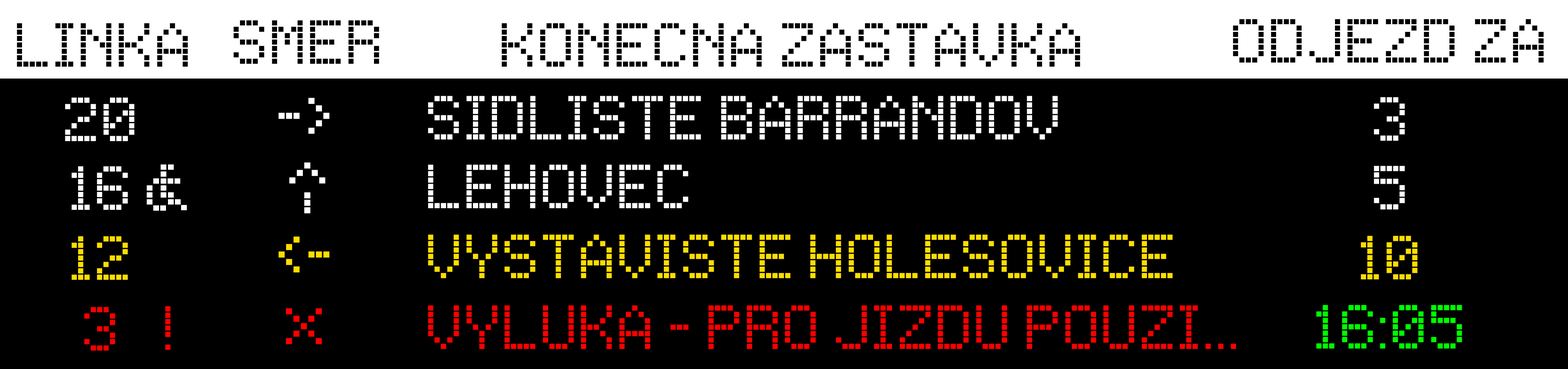
<style>
.page{position:relative;width:1568px;height:369px;background:#000000}
.page>*{position:absolute;margin:0}
.t1{font:102.2px "LCDDot-TR";color:#000000}
.t2{font:102.2px "LCDDot-TR";color:#ffffff}
.t3{font:119.2px "LCDDot-TR";color:#ffffff}
.t4{font:119.5px "LCDDot-TR";color:#ffffff}
.t5{font:102.2px "LCDDot-TR";color:#ffde00}
.t6{font:119.2px "LCDDot-TR";color:#ffde00}
.t7{font:102.2px "LCDDot-TR";color:#ff0000}
.t8{font:102.2px "LCDDot-TR";color:#00ff00}
.t9{font:119.2px "LCDDot-TR";color:#ff0000}
</style>
<div class="page">
<p class="t1" style="left:17px;top:23px;width:171px;height:44px">LINKA</p>
<p class="t1" style="left:233px;top:20px;width:146px;height:44px">SMER</p>
<p class="t1" style="left:502px;top:23px;width:578px;height:44px">KONECNA ZASTAVKA</p>
<p class="t1" style="left:1233px;top:19px;width:311px;height:44px">ODJEZD ZA</p>
<p class="t2" style="left:65px;top:97px;width:69px;height:44px">20</p>
<p class="t3" style="left:278px;top:98px;width:51px;height:36px">-&gt;</p>
<p class="t2" style="left:428px;top:96px;width:630px;height:43px">SIDLISTE BARRANDOV</p>
<p class="t2" style="left:1374px;top:97px;width:31px;height:44px">3</p>
<p class="t2" style="left:72px;top:166px;width:56px;height:44px">16</p>
<p class="t4" style="left:289px;top:162px;width:36px;height:51px;rotate:-90deg">-&gt;</p>
<p class="t2" style="left:428px;top:164px;width:260px;height:44px">LEHOVEC</p>
<p class="t2" style="left:1374px;top:166px;width:31px;height:43px">5</p>
<p class="t5" style="left:72px;top:236px;width:56px;height:44px">12</p>
<p class="t6" style="left:278px;top:236px;width:51px;height:36px">&lt;-</p>
<p class="t5" style="left:428px;top:234px;width:745px;height:44px">VYSTAVISTE HOLESOVICE</p>
<p class="t5" style="left:1361px;top:235px;width:57px;height:44px">10</p>
<p class="t7" style="left:165px;top:306px;width:5px;height:43px">!</p>
<p class="t7" style="left:428px;top:305px;width:808px;height:44px">VYLUKA - PRO JIZDU POUZI...</p>
<p class="t8" style="left:1316px;top:305px;width:146px;height:43px">16:05</p>
<p class="t7" style="left:84px;top:307px;width:31px;height:43px">3</p>
<p class="t9" style="left:286px;top:308px;width:36px;height:36px">x</p>
</div>
